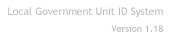
<style>
.page{position:relative;width:170px;height:38px;background:#ffffff}
.page>*{position:absolute;margin:0}
.t1{font:10.4px "TrebuchetMS";color:#bbbbbb}
.t2{font:9.4px "TrebuchetMS";color:#bbbbbb}
</style>
<div class="page">
<p class="t1" style="left:8px;top:7px;width:155px;height:11px">Local Government Unit ID System</p>
<p class="t2" style="left:111px;top:25px;width:52px;height:7px">Version 1.18</p>
</div>
